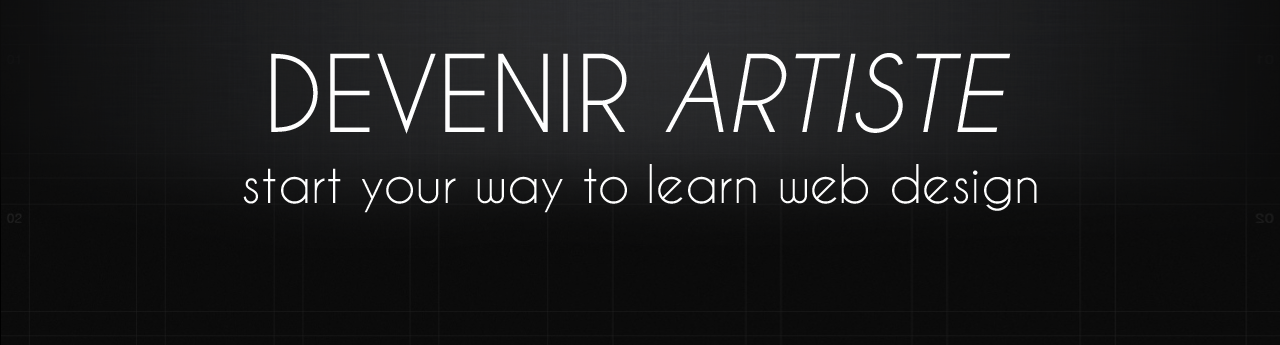
<style>
.page{position:relative;width:1280px;height:345px}
.page>*{position:absolute;margin:0}
.t1{font:100px "CaviarDreams";color:#fefefe}
.t2{font:100px "CaviarDreams";color:#fefefe;font-style:italic}
.t3{font:50px "CaviarDreams";color:#fefefe}
</style>
<div class="page">
<p class="t1" style="left:271px;top:52px;width:740px;height:82px">DEVENIR <span class="t2">ARTISTE</span></p>
<p class="t3" style="left:243px;top:164px;width:794px;height:49px">start your way to learn web design</p>
</div>
